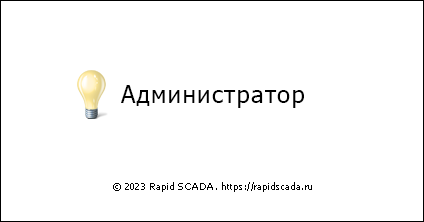
<style>
.page{position:relative;width:424px;height:222px;background:#ffffff}
.page>*{position:absolute;margin:0}
.t1{font:24px "Tahoma";letter-spacing:0.05em;color:#000000}
.t2{font:9px "Tahoma";letter-spacing:0.05em;color:#000000}
</style>
<div class="page">
<p class="t1" style="left:121px;top:85px;width:183px;height:23px">Администратор</p>
<p class="t2" style="left:113px;top:182px;width:199px;height:10px">© 2023 Rapid SCADA. https://rapidscada.ru</p>
</div>
